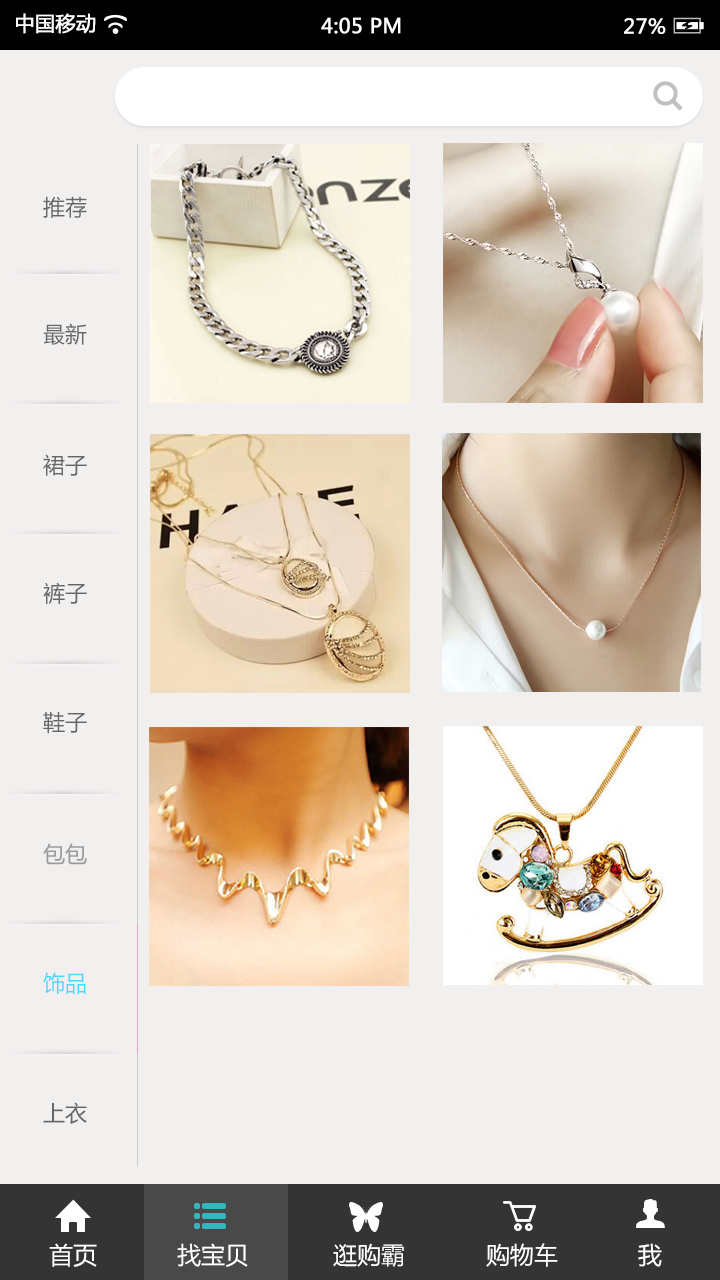
<style>
.page{position:relative;width:720px;height:1280px;background:#f2efef}
.page>*{position:absolute;margin:0}
.t1{font:20px "MicrosoftYaHei";color:#fffcfc;font-weight:bold}
.t2{font:20px "MicrosoftYaHei";color:#ffffff;font-weight:bold}
.t3{font:20px "MicrosoftYaHei";color:#fffefe;font-weight:bold}
.t4{font:22px "MicrosoftYaHei";color:#666666}
.t5{font:22px "MicrosoftYaHei";color:#999999}
.t6{font:22px "MicrosoftYaHei";color:#46d8fe}
.t7{font:24px "MicrosoftYaHei";color:#ffffff}
</style>
<div class="page">
<p class="t1" style="left:16px;top:13px;width:80px;height:21px">中国移动</p>
<p class="t2" style="left:321px;top:17px;width:80px;height:17px">4:05 PM</p>
<p class="t3" style="left:624px;top:18px;width:42px;height:16px">27%</p>
<p class="t4" style="left:43px;top:196px;width:44px;height:22px">推荐</p>
<p class="t4" style="left:43px;top:323px;width:44px;height:22px">最新</p>
<p class="t4" style="left:43px;top:454px;width:44px;height:22px">裙子</p>
<p class="t4" style="left:43px;top:582px;width:44px;height:22px">裤子</p>
<p class="t4" style="left:43px;top:712px;width:44px;height:22px">鞋子</p>
<p class="t5" style="left:43px;top:843px;width:44px;height:22px">包包</p>
<p class="t6" style="left:43px;top:972px;width:43px;height:22px">饰品</p>
<p class="t4" style="left:43px;top:1102px;width:44px;height:22px">上衣</p>
<p class="t7" style="left:49px;top:1243px;width:48px;height:24px">首页</p>
<p class="t7" style="left:177px;top:1243px;width:71px;height:24px">找宝贝</p>
<p class="t7" style="left:333px;top:1243px;width:71px;height:24px">逛购霸</p>
<p class="t7" style="left:486px;top:1243px;width:72px;height:24px">购物车</p>
<p class="t7" style="left:638px;top:1243px;width:24px;height:24px">我</p>
</div>
